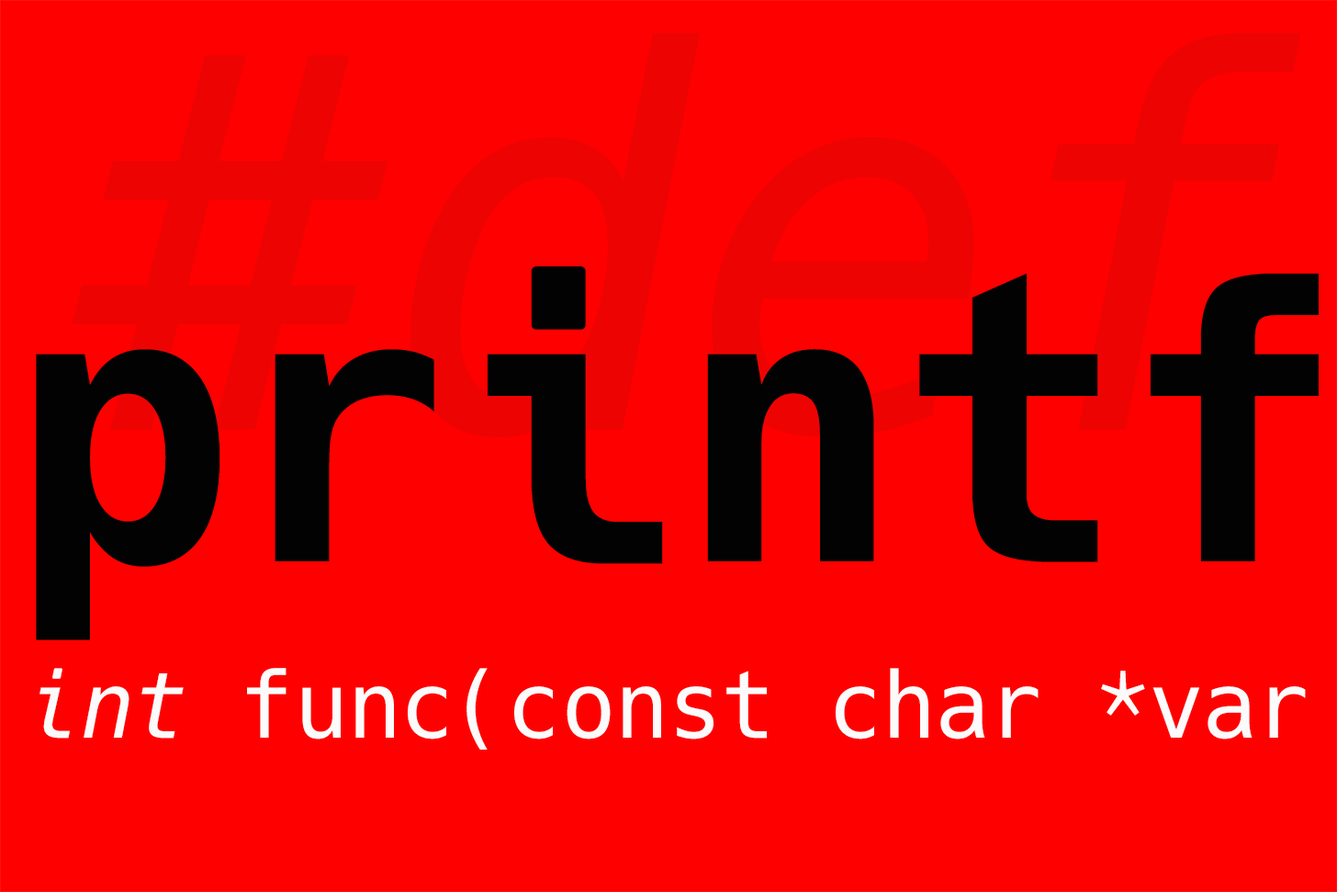
<style>
.page{position:relative;width:1337px;height:892px;background:#ff0000}
.page>*{position:absolute;margin:0}
.t1{font:378.6px "Hack-Bold";letter-spacing:-0.015em;color:#020202}
.t2{font:91.4px "Hack-Regular";letter-spacing:-0.015em;color:#fcfbfb}
.t3{font:91.4px "Hack-RegularOblique";letter-spacing:-0.015em;color:#fcfbfb}
</style>
<div class="page">
<p class="t1" style="left:36px;top:266px;width:1283px;height:374px">printf</p>
<p class="t2" style="left:39px;top:668px;width:1267px;height:81px"><span class="t3">int</span> func(const char *var</p>
</div>
